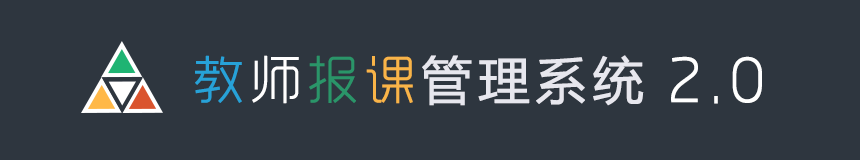
<style>
.page{position:relative;width:860px;height:160px;background:#2e363f}
.page>*{position:absolute;margin:0}
.t1{font:50.7px "MicrosoftYaHei";letter-spacing:0.1em;color:#e7e7ee;font-weight:bold}
.t2{font:50.7px "RTWSYueGoTrial-Light";letter-spacing:0.1em;color:#27a2d8;font-weight:bold}
.t3{font:50.7px "RTWSYueGoTrial-Light";letter-spacing:0.1em;color:#ffffff;font-weight:bold}
.t4{font:50.7px "RTWSYueGoTrial-Light";letter-spacing:0.1em;color:#2a9569;font-weight:bold}
.t5{font:50.7px "RTWSYueGoTrial-Light";letter-spacing:0.1em;color:#f9b448;font-weight:bold}
.t6{font:65.3px "RTWSYueGoTrial-Light";letter-spacing:0.04em;color:#ffffff;font-weight:bold}
</style>
<div class="page">
<p class="t1" style="left:195px;top:55px;width:449px;height:51px"><span class="t2">教</span><span class="t3">师</span><span class="t4">报</span><span class="t5">课</span>管理系统</p>
<p class="t6" style="left:671px;top:56px;width:91px;height:48px">2.0</p>
</div>
